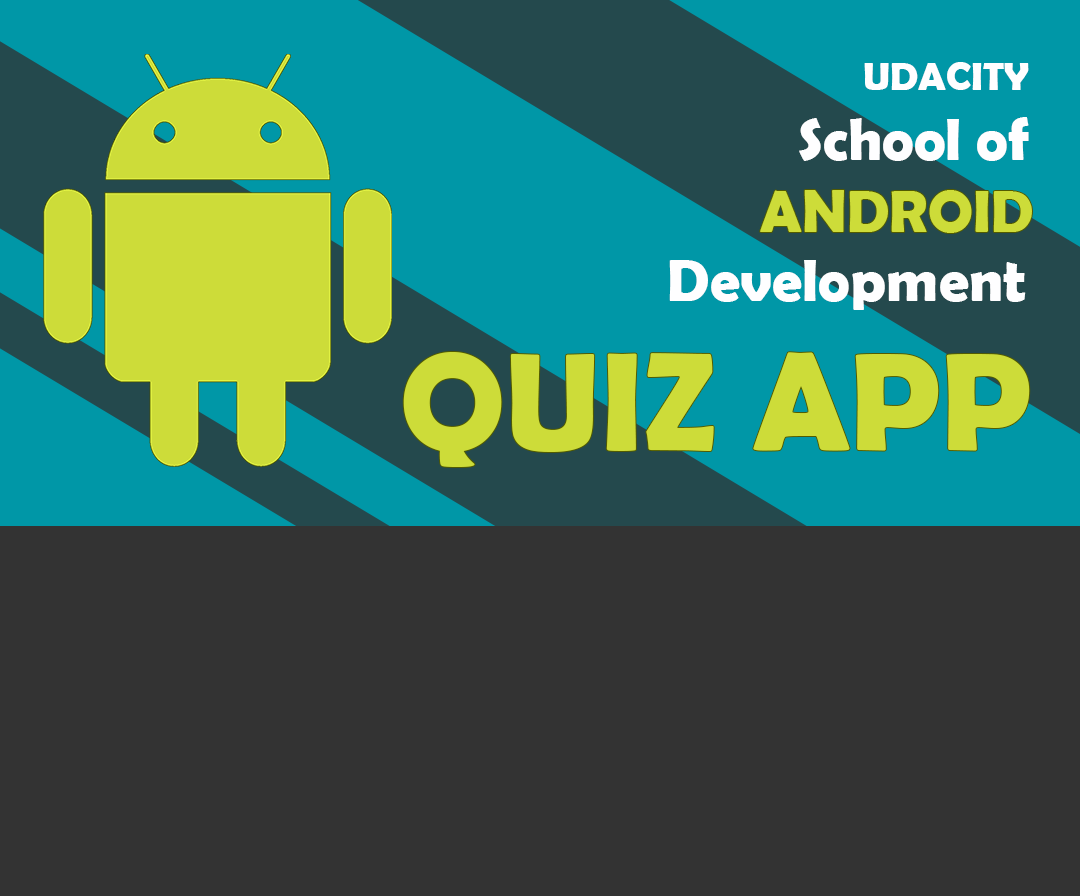
<style>
.page{position:relative;width:1080px;height:896px;background:#333333}
.page>*{position:absolute;margin:0}
.t1{font:40px "BerlinSansFBDemi-Bold";color:#fefeff}
.t2{font:60px "BerlinSansFBDemi-Bold";color:#fefeff}
.t3{font:60px "BerlinSansFBDemi-Bold";color:#cddc39}
.t4{font:140px "BerlinSansFBDemi-Bold";color:#cddc39}
</style>
<div class="page">
<p class="t1" style="left:864px;top:62px;width:165px;height:28px">UDACITY</p>
<p class="t2" style="left:799px;top:117px;width:230px;height:44px">School of</p>
<p class="t3" style="left:760px;top:190px;width:272px;height:43px">ANDROID</p>
<p class="t2" style="left:669px;top:260px;width:357px;height:50px">Development</p>
<p class="t4" style="left:403px;top:352px;width:627px;height:115px">QUIZ APP</p>
</div>
